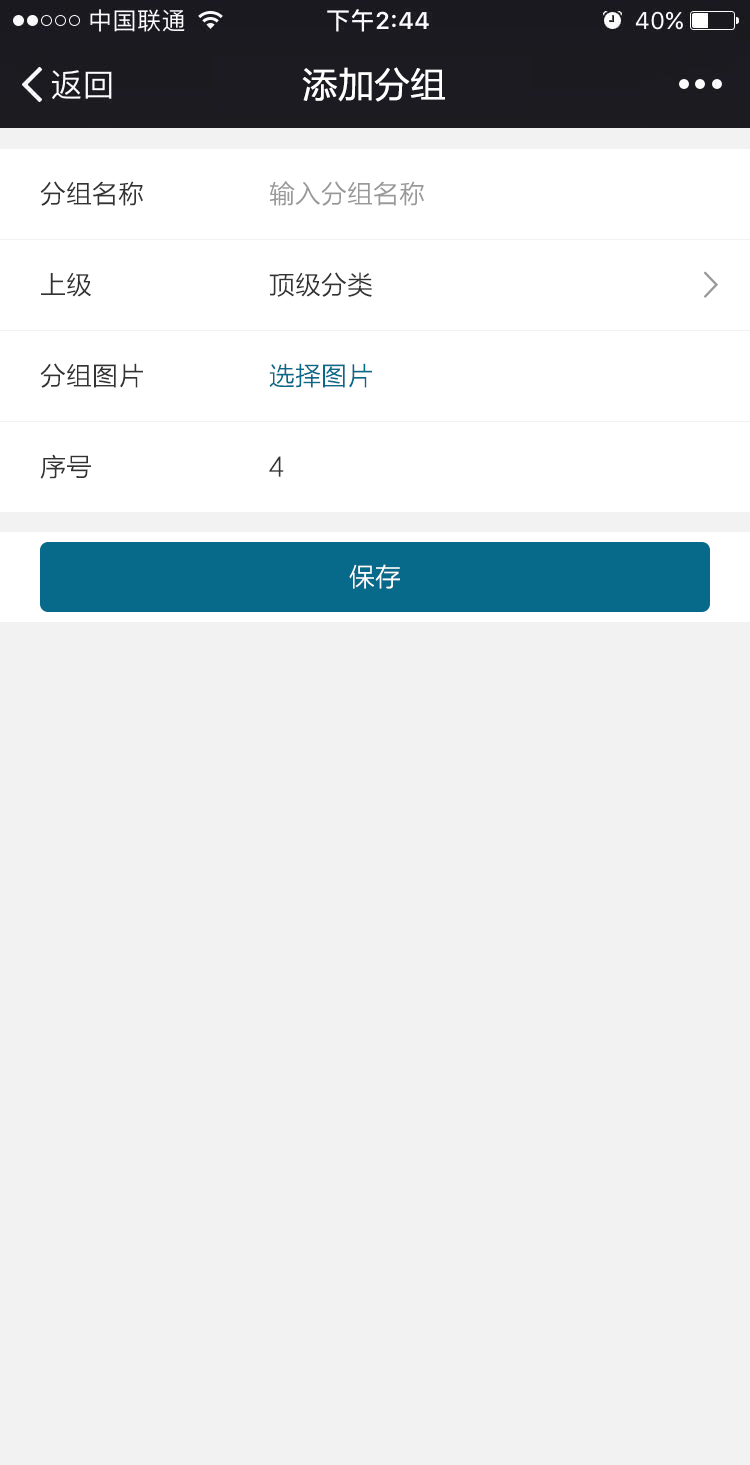
<style>
.page{position:relative;width:750px;height:1465px;background:#f2f2f2}
.page>*{position:absolute;margin:0}
.t1{font:36px "FZLTHK--GBK1-0";color:#ffffff}
.t2{font:26px "FZLTXHK";color:#333333}
.t3{font:26px "FZLTXHK";color:#999999}
.t4{font:26px "FZLTXHK";color:#086a8b}
.t5{font:26px "FZLTXHK";color:#ffffff}
</style>
<div class="page">
<p class="t1" style="left:302px;top:67px;width:143px;height:35px">添加分组</p>
<p class="t2" style="left:40px;top:181px;width:103px;height:25px">分组名称</p>
<p class="t2" style="left:41px;top:181px;width:102px;height:25px">商品名称</p>
<p class="t3" style="left:270px;top:181px;width:154px;height:25px">输入分组名称</p>
<p class="t2" style="left:41px;top:272px;width:50px;height:25px">上级</p>
<p class="t2" style="left:269px;top:272px;width:103px;height:25px">顶级分类</p>
<p class="t2" style="left:40px;top:363px;width:103px;height:25px">分组图片</p>
<p class="t4" style="left:269px;top:363px;width:103px;height:25px">选择图片</p>
<p class="t2" style="left:40px;top:454px;width:51px;height:25px">序号</p>
<p class="t2" style="left:269px;top:456px;width:15px;height:21px">4</p>
<p class="t5" style="left:349px;top:564px;width:51px;height:25px">保存</p>
</div>
